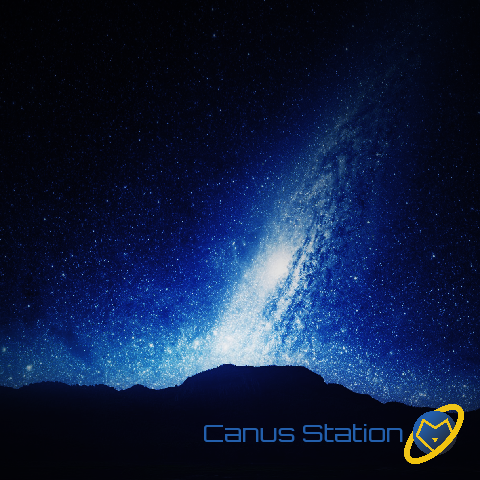
<style>
.page{position:relative;width:480px;height:480px}
.page>*{position:absolute;margin:0}
.t1{font:24px "Orbitron-Light";letter-spacing:-0.01em;color:#235fac;scale:1.1 1}
</style>
<div class="page">
<p class="t1" style="left:204px;top:424px;width:199px;height:18px">Canus Station</p>
</div>
